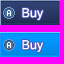
<style>
.page{position:relative;width:64px;height:64px;background:#ff00ff}
.page>*{position:absolute;margin:0}
.t1{font:20px "Kartika";color:#ffffff}
</style>
<div class="page">
<p class="t1" style="left:22px;top:8px;width:22px;height:12px">Buy</p>
<p class="t1" style="left:22px;top:40px;width:22px;height:12px">Buy</p>
</div>
